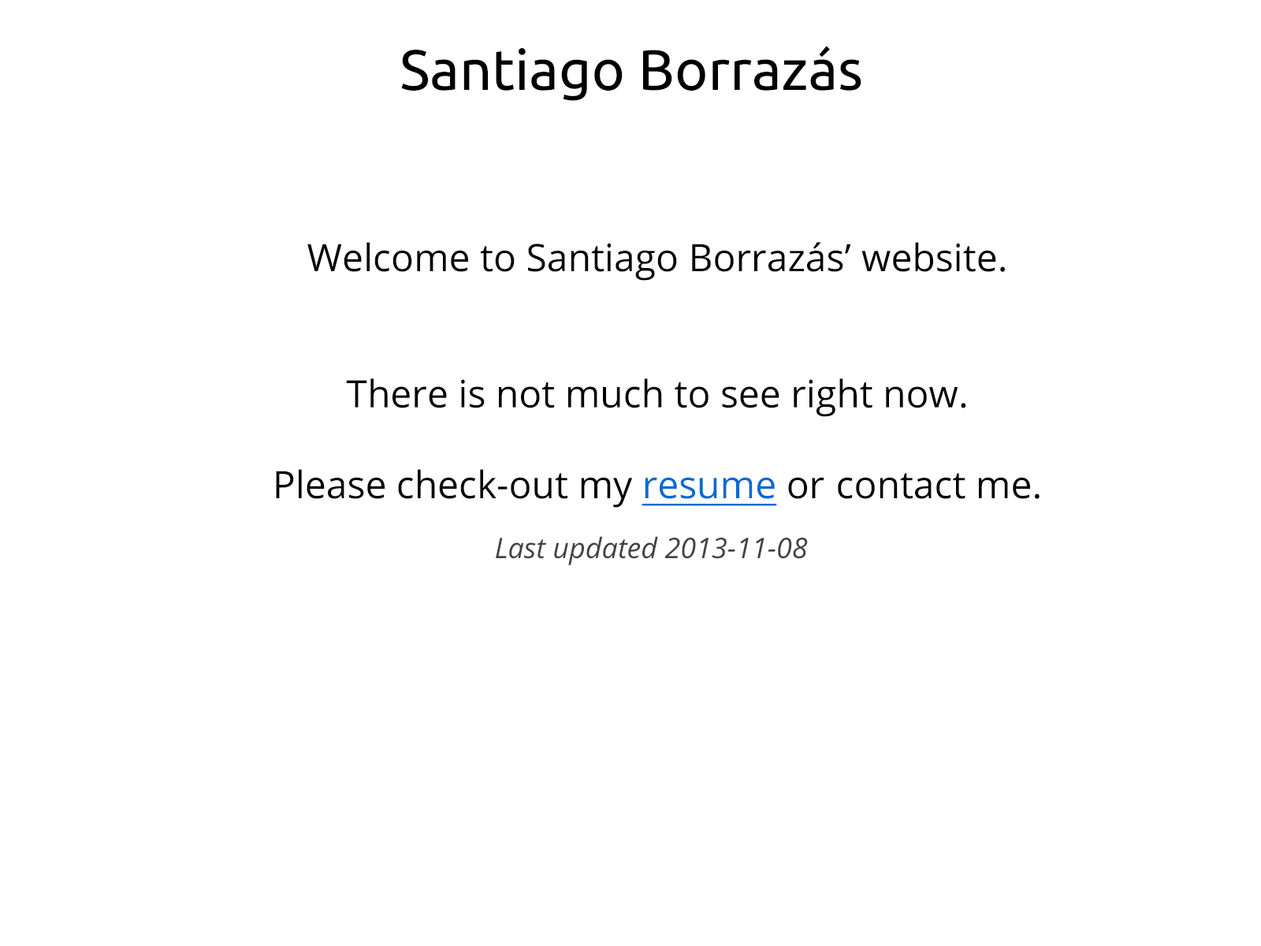
<style>
.page{position:relative;width:1261px;height:946px;background:#ffffff}
.page>*{position:absolute;margin:0}
.t1{font:56.7px "Ubuntu";color:#000000}
.t2{font:37.8px "OpenSans";color:#000000}
.t3{font:37.8px "OpenSans";color:#0269d1;text-decoration:underline}
.t4{font:28.4px "OpenSans-Italic";color:#424242}
</style>
<div class="page">
<p class="t1" style="left:401px;top:46px;width:460px;height:55px">Santiago Borrazás</p>
<p class="t2" style="left:276px;top:242px;width:763px;height:266px;text-align:center">Welcome to Santiago Borrazás’ website.<br><br><br>There is not much to see right now.<br><br>Please check-out my <span class="t3">resume</span> or contact me.</p>
<p class="t4" style="left:496px;top:536px;width:312px;height:29px">Last updated 2013-11-08</p>
</div>
